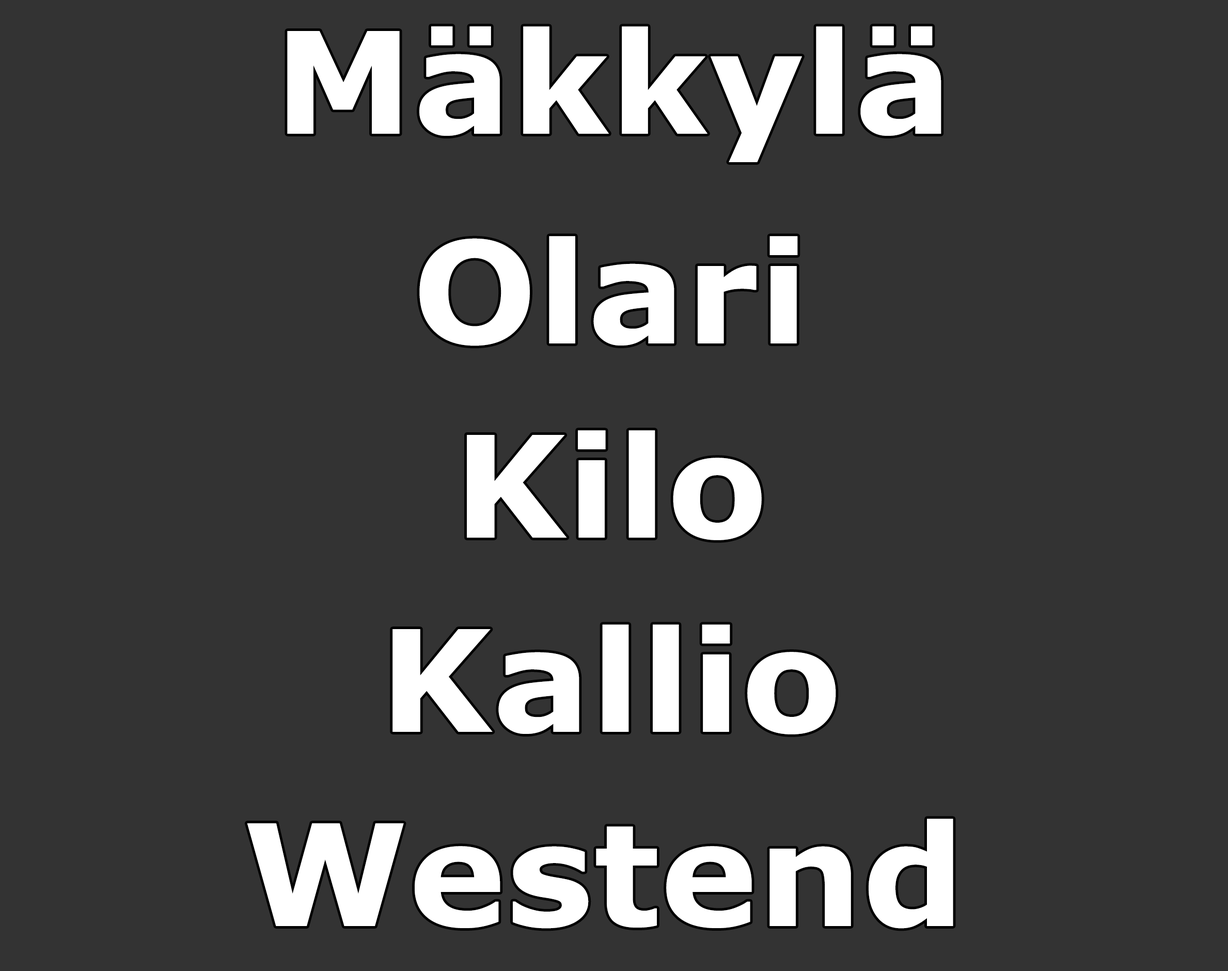
<style>
.page{position:relative;width:1228px;height:971px;background:#333333}
.page>*{position:absolute;margin:0}
.t1{font:141.1px "Verdana-Bold";color:#ffffff;scale:1.04 1}
</style>
<div class="page">
<p class="t1" style="left:287px;top:26px;width:654px;height:136px">Mäkkylä</p>
<p class="t1" style="left:419px;top:236px;width:379px;height:110px">Olari</p>
<p class="t1" style="left:467px;top:430px;width:295px;height:110px">Kilo</p>
<p class="t1" style="left:393px;top:624px;width:443px;height:110px">Kallio</p>
<p class="t1" style="left:247px;top:819px;width:706px;height:110px">Westend</p>
</div>
